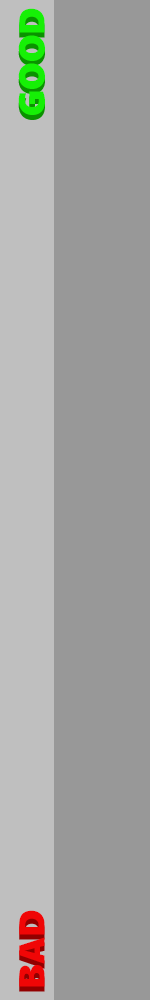
<style>
.page{position:relative;width:150px;height:1000px;background:#989898}
.page>*{position:absolute;margin:0}
.t1{font:36px "SegoeUIBlack";color:#16f006}
.t2{font:36px "SegoeUIBlack";color:#f00606}
</style>
<div class="page">
<p class="t1" style="left:18px;top:8px;width:27px;height:107px;rotate:-90deg">GOOD</p>
<p class="t2" style="left:19px;top:910px;width:26px;height:77px;rotate:-90deg">BAD</p>
</div>
